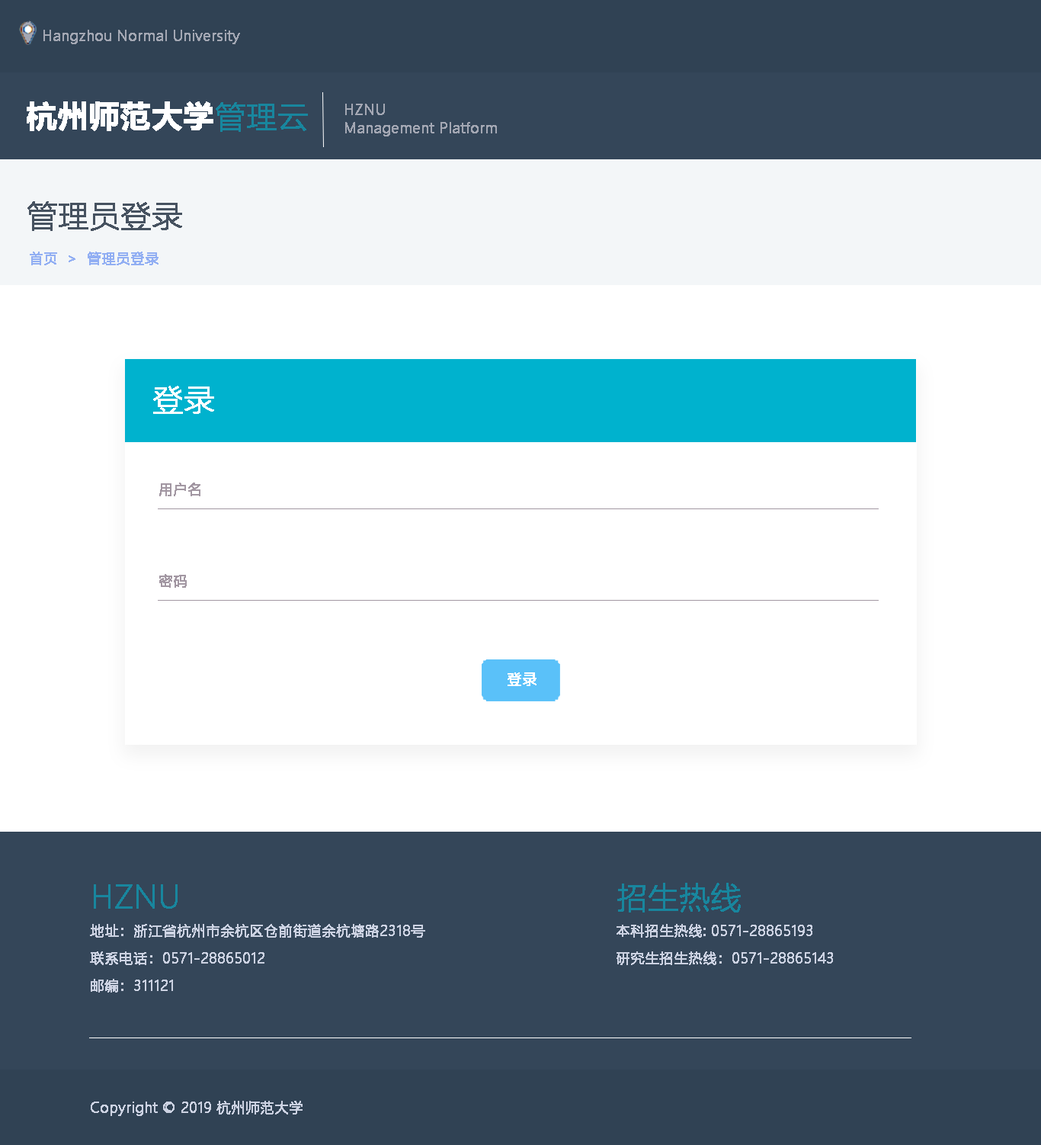
<style>
.page{position:relative;width:1041px;height:1145px;background:#ffffff}
.page>*{position:absolute;margin:0}
.t1{font:13.7px "MicrosoftYaHeiLight";color:#a3a7b3;font-weight:bold}
.t2{font:30.5px "MicrosoftYaHei-Bold";color:#ffffff;font-weight:bold}
.t3{font:30.5px "MicrosoftYaHeiLight";color:#18869e;font-weight:bold}
.t4{font:13.7px/18.3px "MicrosoftYaHeiLight";color:#a3a7b3;font-weight:bold}
.t5{font:30.5px "MicrosoftYaHeiLight";color:#465260;font-weight:bold}
.t6{font:13.7px "MicrosoftYaHeiLight";color:#92aff3;font-weight:bold}
.t7{font:30.5px "MicrosoftYaHeiLight";color:#ffffff;font-weight:bold}
.t8{font:13.7px "MicrosoftYaHeiLight";color:#a298a2;font-weight:bold}
.t9{font:14.4px "MicrosoftYaHeiLight";color:#ffffff;font-weight:bold}
.t10{font:13.7px/27.4px "MicrosoftYaHeiLight";color:#ccd2e2;font-weight:bold}
.t11{font:13.7px "MicrosoftYaHeiLight";color:#ccd2e2;font-weight:bold}
</style>
<div class="page">
<p class="t1" style="left:43px;top:30px;width:197px;height:14px">Hangzhou Normal University</p>
<p class="t2" style="left:27px;top:101px;width:186px;height:30px">杭州师范大学</p>
<p class="t3" style="left:216px;top:102px;width:92px;height:30px">管理云</p>
<p class="t4" style="left:345px;top:104px;width:152px;height:32px">HZNU<br>Management Platform</p>
<p class="t5" style="left:27px;top:201px;width:155px;height:30px">管理员登录</p>
<p class="t6" style="left:30px;top:252px;width:129px;height:13px">首页  &gt;  管理员登录</p>
<p class="t7" style="left:153px;top:386px;width:61px;height:28px">登录</p>
<p class="t8" style="left:159px;top:483px;width:41px;height:13px">用户名</p>
<p class="t8" style="left:159px;top:574px;width:28px;height:14px">密码</p>
<p class="t9" style="left:508px;top:672px;width:29px;height:14px">登录</p>
<p class="t3" style="left:94px;top:884px;width:84px;height:25px">HZNU</p>
<p class="t3" style="left:618px;top:883px;width:123px;height:30px">招生热线</p>
<p class="t10" style="left:90px;top:924px;width:335px;height:69px">地址：浙江省杭州市余杭区仓前街道余杭塘路2318号<br>联系电话：0571-28865012<br>邮编：311121</p>
<p class="t10" style="left:617px;top:924px;width:216px;height:41px">本科招生热线: 0571-28865193 <br>研究生招生热线：0571-28865143</p>
<p class="t11" style="left:91px;top:1101px;width:212px;height:15px">Copyright © 2019 杭州师范大学</p>
</div>
